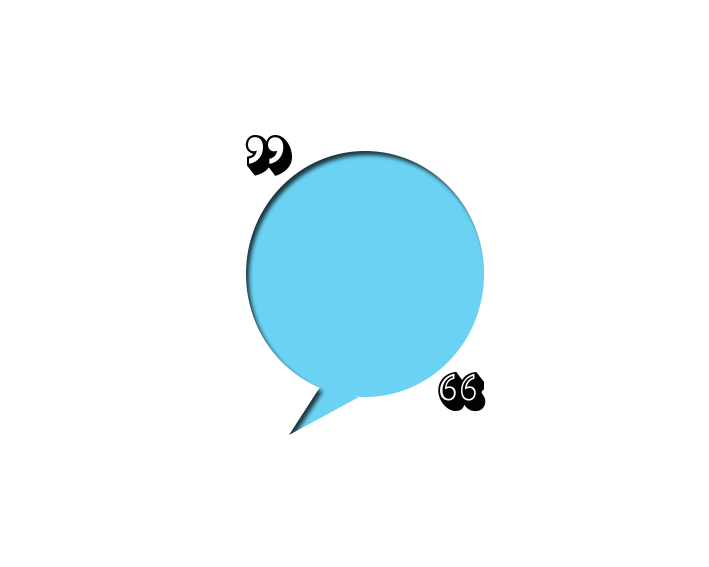
<style>
.page{position:relative;width:709px;height:567px;background:#ffffff}
.page>*{position:absolute;margin:0}
.t1{font:120px "RosewoodStd-Regular";color:#020202}
</style>
<div class="page">
<p class="t1" style="left:245px;top:135px;width:47px;height:41px">„</p>
<p class="t1" style="left:438px;top:371px;width:48px;height:41px">“</p>
</div>
